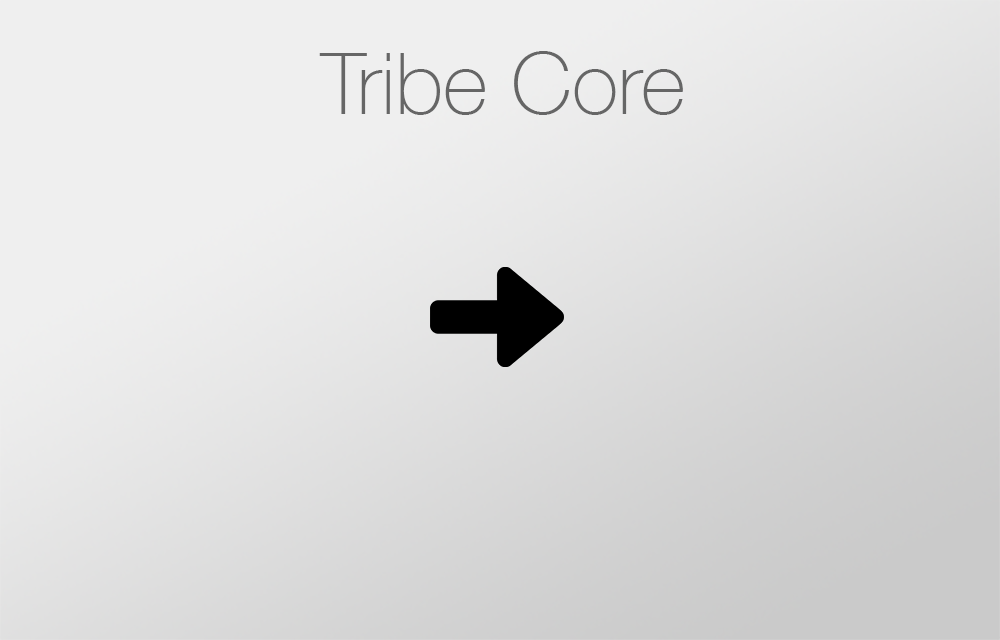
<style>
.page{position:relative;width:1000px;height:640px}
.page>*{position:absolute;margin:0}
.t1{font:85.7px "HelveticaNeue-Thin";color:#666666}
</style>
<div class="page">
<p class="t1" style="left:319px;top:51px;width:364px;height:64px">Tribe Core</p>
</div>
